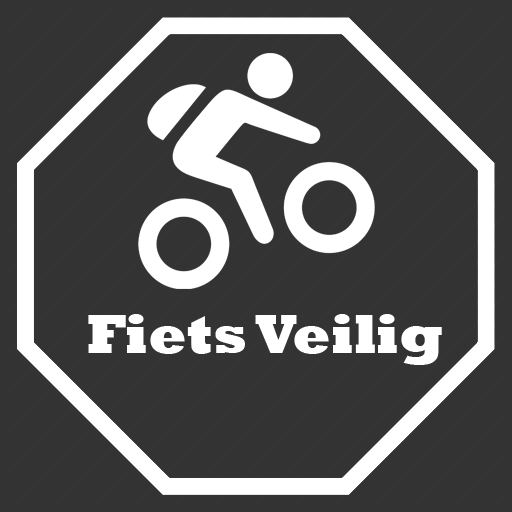
<style>
.page{position:relative;width:512px;height:512px;background:#333333}
.page>*{position:absolute;margin:0}
.t1{font:56px "Rockwell-ExtraBold";color:#ffffff}
</style>
<div class="page">
<p class="t1" style="left:88px;top:314px;width:354px;height:51px">Fiets Veilig</p>
</div>
